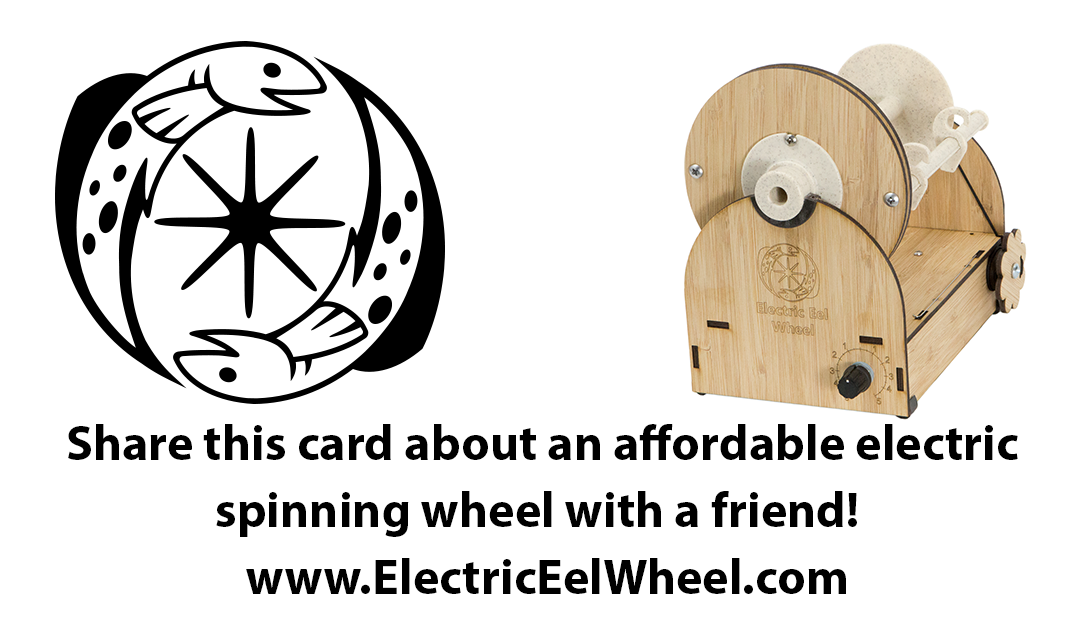
<style>
.page{position:relative;width:1085px;height:635px;background:#ffffff}
.page>*{position:absolute;margin:0}
.t1{font:50px/66.7px "MyriadPro-Bold";color:#000000}
</style>
<div class="page">
<p class="t1" style="left:68px;top:424px;width:950px;height:170px;text-align:center">Share this card about an affordable electric <br>spinning wheel with a friend!  <br>www.ElectricEelWheel.com</p>
</div>
